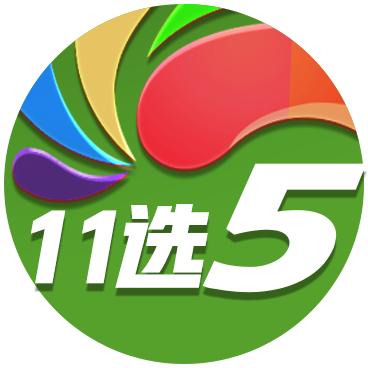
<style>
.page{position:relative;width:368px;height:368px;background:#ffffff}
.page>*{position:absolute;margin:0}
.t1{font:91px "HYYaKuHeiW";letter-spacing:-0.1em;color:#ffffff;font-style:italic}
</style>
<div class="page">
<p class="t1" style="left:31px;top:204px;width:178px;height:84px">11选</p>
</div>
